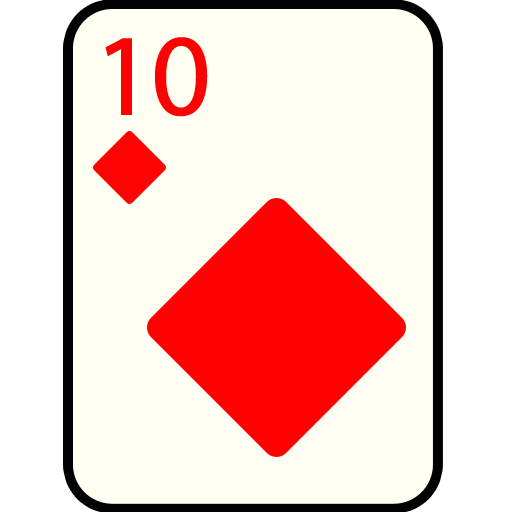
<style>
.page{position:relative;width:512px;height:512px;background:#fffff2}
.page>*{position:absolute;margin:0}
.t1{font:200px "MyriadPro-Regular";letter-spacing:-0.05em;color:#fd0202;font-variant:small-caps;font-weight:bold}
</style>
<div class="page">
<p class="t1" style="left:105px;top:37px;width:103px;height:80px">10</p>
</div>
